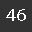
<style>
.page{position:relative;width:32px;height:32px;background:#333333}
.page>*{position:absolute;margin:0}
.t1{font:17.8px "MyriadPro-Regular";color:#ffffff;scale:1.12 1}
</style>
<div class="page">
<p class="t1" style="left:6px;top:9px;width:20px;height:12px">46</p>
</div>
